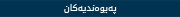
<style>
.page{position:relative;width:180px;height:17px;background:#003351}
.page>*{position:absolute;margin:0}
.t1{font:9px "DroidArabicKufi";color:#ffffff}
</style>
<div class="page">
<p class="t1" style="left:64px;top:4px;width:53px;height:10px">پەیوەندیەکان</p>
</div>
